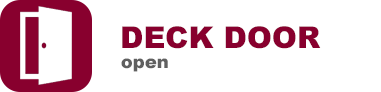
<style>
.page{position:relative;width:381px;height:92px;background:#ffffff}
.page>*{position:absolute;margin:0}
.t1{font:30px "Arial-Black";color:#88002e}
.t2{font:18px "Arial-Black";color:#606060}
</style>
<div class="page">
<p class="t1" style="left:122px;top:26px;width:199px;height:23px">DECK DOOR</p>
<p class="t2" style="left:121px;top:58px;width:47px;height:14px">open</p>
</div>
